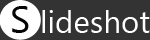
<style>
.page{position:relative;width:150px;height:40px;background:#333333}
.page>*{position:absolute;margin:0}
.t1{font:37.6px "KhmerUI";color:#050505}
.t2{font:31.4px "KhmerUI";color:#ffffff}
</style>
<div class="page">
<p class="t1" style="left:12px;top:6px;width:17px;height:27px">S</p>
<p class="t2" style="left:42px;top:10px;width:108px;height:23px">lideshot</p>
</div>
